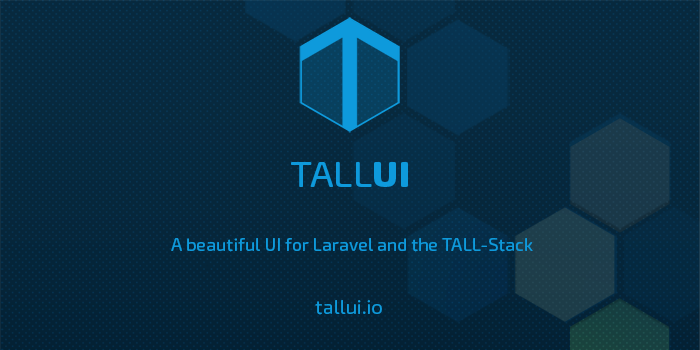
<style>
.page{position:relative;width:700px;height:350px}
.page>*{position:absolute;margin:0}
.t1{font:36px "ExoSoft-Medium";color:#0e9adc;scale:1.05 1}
.t2{font:36px "ExoSoft-ExtraBold";color:#0e9adc;scale:1.05 1}
.t3{font:18px "ExoSoft-Medium";color:#0e9adc}
.t4{font:20px "ExoSoft-Regular";color:#0e9adc}
</style>
<div class="page">
<p class="t1" style="left:291px;top:162px;width:117px;height:25px">TALL<span class="t2">UI</span></p>
<p class="t3" style="left:171px;top:238px;width:362px;height:14px">A beautiful UI for Laravel and the TALL-Stack</p>
<p class="t4" style="left:315px;top:300px;width:67px;height:15px">tallui.io</p>
</div>
